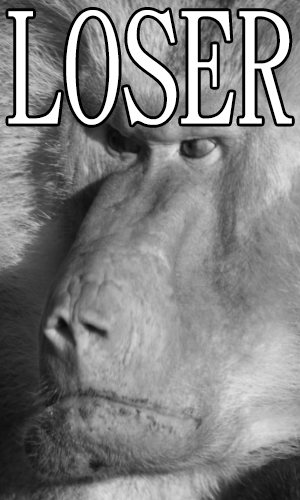
<style>
.page{position:relative;width:300px;height:500px}
.page>*{position:absolute;margin:0}
.t1{font:152px "DFKaiShu-SB-Estd-BF";color:#ffffff;scale:0.76 1}
</style>
<div class="page">
<p class="t1" style="left:8px;top:10px;width:284px;height:115px">LOSER</p>
</div>
